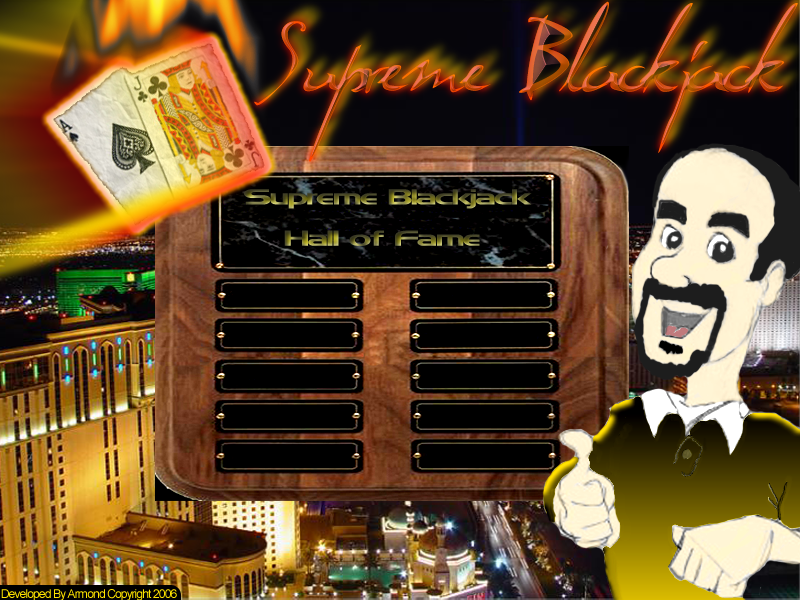
<style>
.page{position:relative;width:800px;height:600px}
.page>*{position:absolute;margin:0}
.t1{font:21.8px "Denmark";letter-spacing:-0.075em;scale:1.61 1}
.t2{font:12px "Copyright Cyr Bold";letter-spacing:-0.075em;color:#ffe400}
</style>
<div class="page">
<p class="t1" style="left:244px;top:189px;width:288px;height:20px">Supreme Blackjack</p>
<p class="t1" style="left:284px;top:230px;width:196px;height:16px">Hall of Fame</p>
<p class="t2" style="left:1px;top:589px;width:176px;height:12px">Developed By Armond Copyright 2006</p>
</div>
